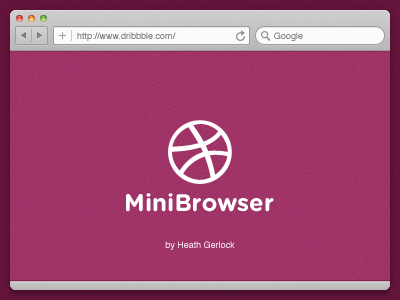
<style>
.page{position:relative;width:400px;height:300px}
.page>*{position:absolute;margin:0}
.t1{font:9px "Helvetica";color:#676767}
.t2{font:9px "Helvetica"}
.t3{font:24px "GothamRounded-Bold";color:#ffffff}
.t4{font:9px "Helvetica";color:#ffffff}
</style>
<div class="page">
<p class="t1" style="left:77px;top:32px;width:99px;height:9px">http://www.dribbble.com/</p>
<p class="t2" style="left:274px;top:32px;width:29px;height:9px">Google</p>
<p class="t3" style="left:126px;top:193px;width:148px;height:19px">MiniBrowser</p>
<p class="t4" style="left:165px;top:241px;width:70px;height:9px">by Heath Gerlock</p>
</div>
